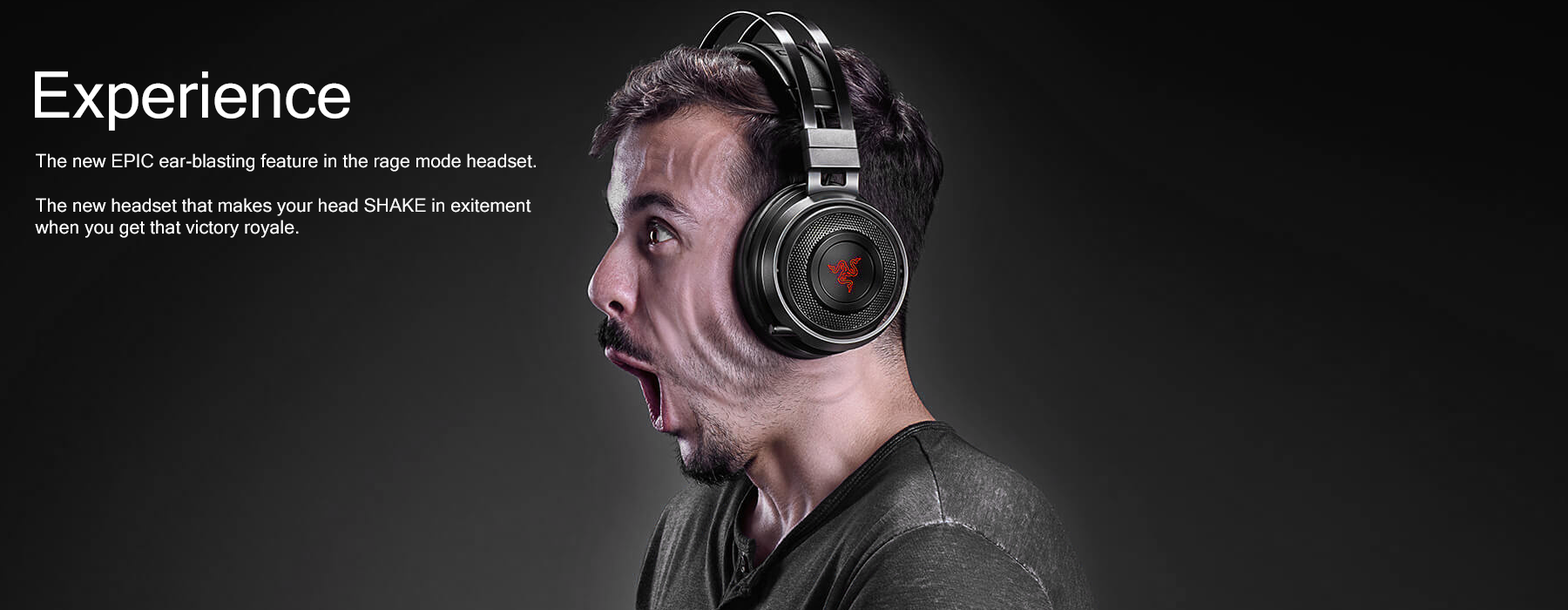
<style>
.page{position:relative;width:1568px;height:610px}
.page>*{position:absolute;margin:0}
.t1{font:64.5px "MicrosoftSansSerif";color:#ffffff}
.t2{font:18.5px "MicrosoftSansSerif";color:#ffffff}
</style>
<div class="page">
<p class="t1" style="left:35px;top:71px;width:315px;height:60px">Experience</p>
<p class="t2" style="left:36px;top:153px;width:500px;height:19px">The new EPIC ear-blasting feature in the rage mode headset.</p>
<p class="t2" style="left:35px;top:198px;width:496px;height:40px">The new headset that makes your head SHAKE in exitement <br>when you get that victory royale.</p>
</div>
